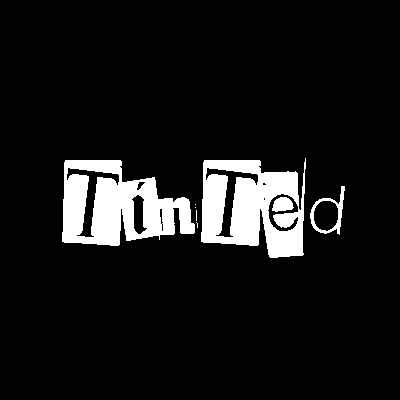
<style>
.page{position:relative;width:400px;height:400px;background:#000000}
.page>*{position:absolute;margin:0}
.t1{font:100px "BlackCasper";color:#ffffff}
</style>
<div class="page">
<p class="t1" style="left:62px;top:158px;width:283px;height:100px">TinTed</p>
</div>
